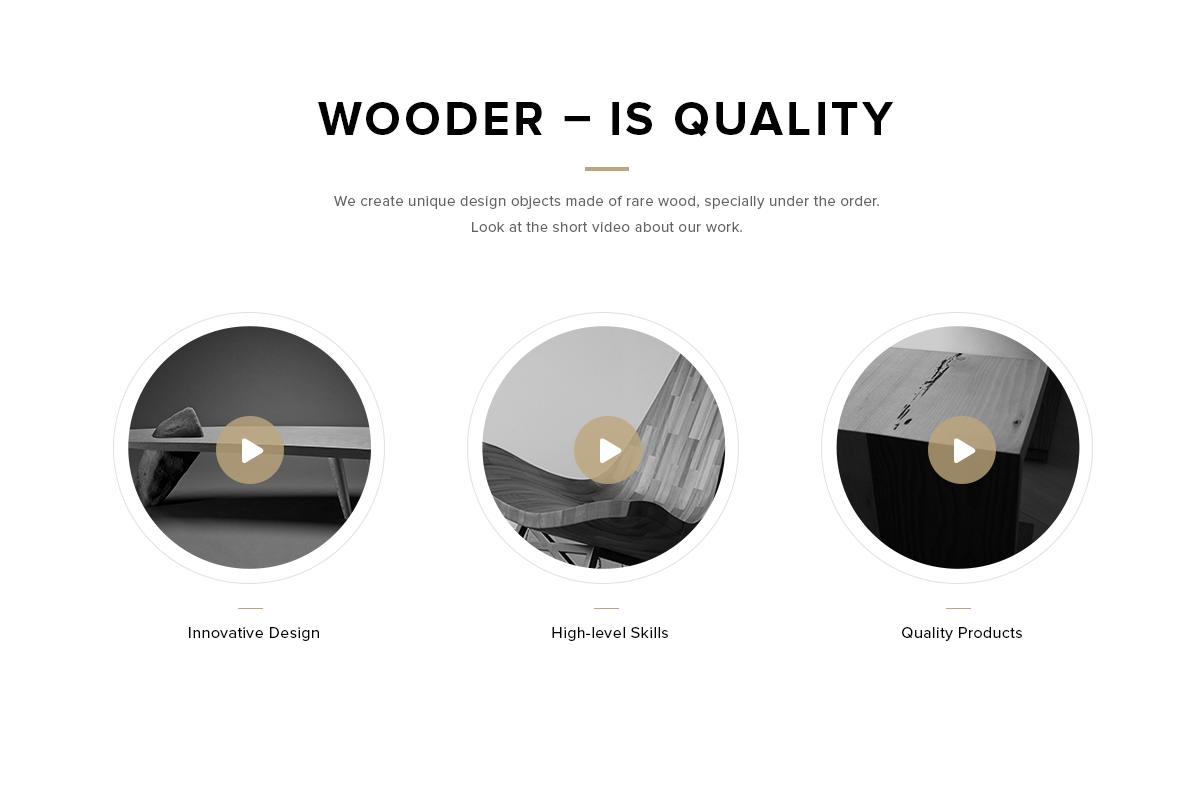
<style>
.page{position:relative;width:1202px;height:790px;background:#ffffff}
.page>*{position:absolute;margin:0}
.t1{font:48px "ProximaNova-Bold";letter-spacing:0.07em;color:#000000;text-transform:uppercase}
.t2{font:48px "ProximaNova-Bold";letter-spacing:0.025em;color:#000000;text-transform:uppercase}
.t3{font:15px/25px "ProximaNova-Regular";letter-spacing:0.025em;color:#636262}
.t4{font:16px "ProximaNova-Regular";letter-spacing:0.025em;color:#000000}
</style>
<div class="page">
<p class="t1" style="left:318px;top:102px;width:576px;height:35px">wooder <span class="t2">–</span> is quality</p>
<p class="t3" style="left:334px;top:195px;width:545px;height:37px;text-align:center">We create unique design objects made of rare wood, specially under the order. Look at the short video about our work.</p>
<p class="t4" style="left:189px;top:627px;width:130px;height:14px">Innovative Design</p>
<p class="t4" style="left:552px;top:627px;width:116px;height:14px">High-level Skills</p>
<p class="t4" style="left:902px;top:627px;width:120px;height:14px">Quality Products</p>
</div>
